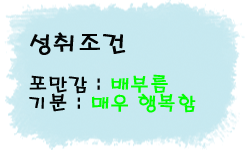
<style>
.page{position:relative;width:250px;height:150px}
.page>*{position:absolute;margin:0}
.t1{font:19.4px "H2porM";color:#00ff00;font-weight:bold}
.t2{font:24px "H2porM";color:#030404;font-weight:bold}
.t3{font:19.4px "H2porM";color:#030404;font-weight:bold}
</style>
<div class="page">
<p class="t1" style="left:29px;top:32px;width:167px;height:81px"><span class="t2">성취조건<br><br></span><span class="t3">포만감 : </span>배부름<br><span class="t3">기분 : </span>매우 행복함</p>
</div>
